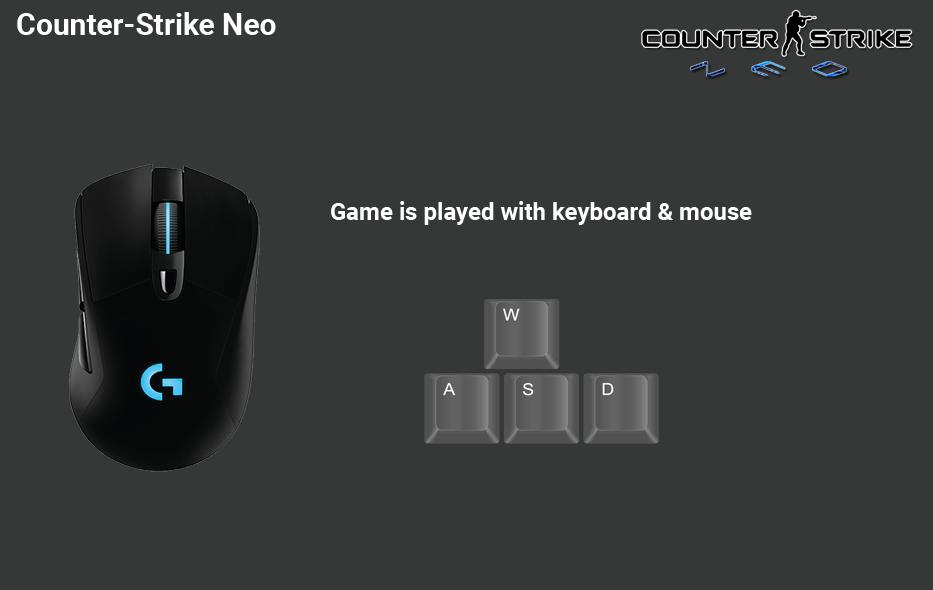
<style>
.page{position:relative;width:933px;height:590px;background:#363838}
.page>*{position:absolute;margin:0}
.t1{font:30px "Roboto-Bold";color:#ffffff}
.t2{font:24px "Roboto-Bold";color:#ffffff}
</style>
<div class="page">
<p class="t1" style="left:17px;top:12px;width:259px;height:23px">Counter-Strike Neo</p>
<p class="t2" style="left:331px;top:201px;width:421px;height:24px">Game is played with keyboard &amp; mouse</p>
</div>
